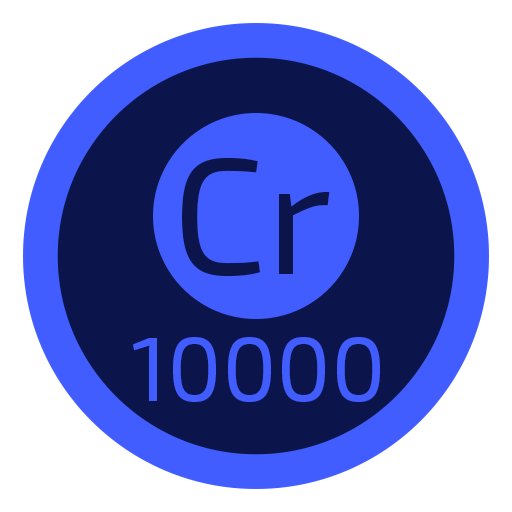
<style>
.page{position:relative;width:512px;height:512px;background:#ffffff}
.page>*{position:absolute;margin:0}
.t1{font:165.1px "Exo2-Regular";color:#0c154b}
.t2{font:90.9px "Exo2-Regular";color:#425dff}
</style>
<div class="page">
<p class="t1" style="left:182px;top:157px;width:148px;height:120px">Cr</p>
<p class="t2" style="left:133px;top:337px;width:247px;height:65px">10000</p>
</div>
